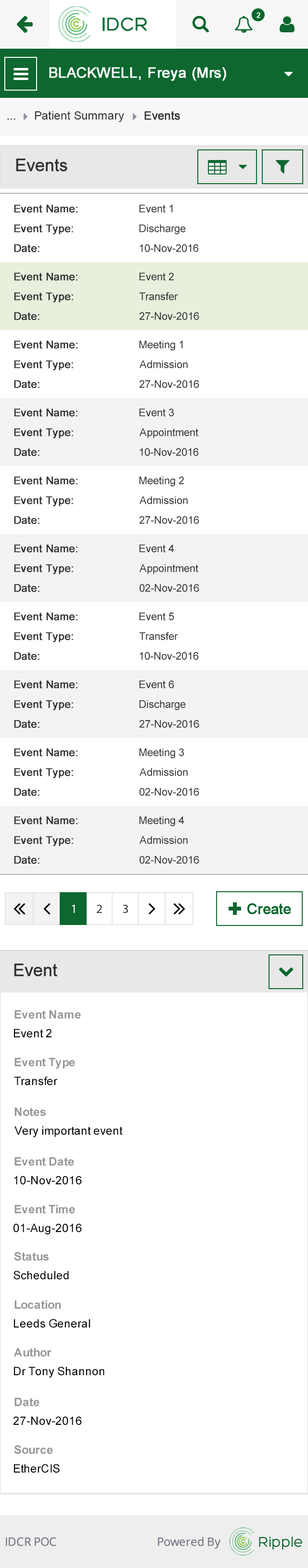
<style>
.page{position:relative;width:308px;height:1568px;background:#ffffff}
.page>*{position:absolute;margin:0}
.t1{font:11.6px "ArialMT";color:#313131}
.t2{font:11.6px "ArialMT";color:#313131;font-weight:bold}
.t3{font:17.4px "ArialMT";color:#303030;font-weight:bold}
.t4{font:10.6px "ArialMT";color:#303030;font-weight:bold}
.t5{font:10.6px "ArialMT";color:#303030}
.t6{font:11.6px "Arial-BoldMT";color:#959595}
.t7{font:11.6px "ArialMT";color:#000000}
</style>
<div class="page">
<p class="t1" style="left:35px;top:111px;width:89px;height:11px">Patient Summary</p>
<p class="t2" style="left:145px;top:111px;width:35px;height:9px">Events</p>
<p class="t1" style="left:7px;top:119px;width:8px;height:1px">...</p>
<p class="t3" style="left:16px;top:159px;width:51px;height:13px">Events</p>
<p class="t4" style="left:14px;top:204px;width:64px;height:9px">Event Name:</p>
<p class="t5" style="left:139px;top:204px;width:34px;height:9px">Event 1</p>
<p class="t4" style="left:14px;top:224px;width:59px;height:11px">Event Type:</p>
<p class="t5" style="left:139px;top:224px;width:47px;height:10px">Discharge</p>
<p class="t4" style="left:14px;top:244px;width:26px;height:8px">Date:</p>
<p class="t5" style="left:140px;top:244px;width:59px;height:8px">10-Nov-2016</p>
<p class="t4" style="left:14px;top:272px;width:64px;height:9px">Event Name:</p>
<p class="t5" style="left:139px;top:272px;width:35px;height:9px">Event 2</p>
<p class="t4" style="left:14px;top:292px;width:59px;height:11px">Event Type:</p>
<p class="t5" style="left:139px;top:292px;width:39px;height:8px">Transfer</p>
<p class="t4" style="left:14px;top:312px;width:26px;height:8px">Date:</p>
<p class="t5" style="left:139px;top:312px;width:61px;height:8px">27-Nov-2016</p>
<p class="t4" style="left:14px;top:340px;width:64px;height:8px">Event Name:</p>
<p class="t5" style="left:139px;top:340px;width:44px;height:10px">Meeting 1</p>
<p class="t4" style="left:14px;top:360px;width:59px;height:11px">Event Type:</p>
<p class="t5" style="left:140px;top:360px;width:48px;height:8px">Admission</p>
<p class="t4" style="left:14px;top:380px;width:26px;height:8px">Date:</p>
<p class="t5" style="left:139px;top:380px;width:61px;height:8px">27-Nov-2016</p>
<p class="t4" style="left:14px;top:408px;width:64px;height:8px">Event Name:</p>
<p class="t5" style="left:139px;top:408px;width:35px;height:8px">Event 3</p>
<p class="t4" style="left:14px;top:428px;width:59px;height:11px">Event Type:</p>
<p class="t5" style="left:140px;top:428px;width:59px;height:10px">Appointment</p>
<p class="t4" style="left:14px;top:448px;width:26px;height:8px">Date:</p>
<p class="t5" style="left:140px;top:448px;width:59px;height:8px">10-Nov-2016</p>
<p class="t4" style="left:14px;top:476px;width:64px;height:8px">Event Name:</p>
<p class="t5" style="left:139px;top:476px;width:45px;height:10px">Meeting 2</p>
<p class="t4" style="left:14px;top:496px;width:59px;height:11px">Event Type:</p>
<p class="t5" style="left:140px;top:496px;width:48px;height:8px">Admission</p>
<p class="t4" style="left:14px;top:516px;width:26px;height:8px">Date:</p>
<p class="t5" style="left:139px;top:516px;width:61px;height:8px">27-Nov-2016</p>
<p class="t4" style="left:14px;top:544px;width:64px;height:8px">Event Name:</p>
<p class="t5" style="left:139px;top:544px;width:35px;height:8px">Event 4</p>
<p class="t4" style="left:14px;top:564px;width:59px;height:11px">Event Type:</p>
<p class="t5" style="left:140px;top:564px;width:59px;height:10px">Appointment</p>
<p class="t4" style="left:14px;top:584px;width:26px;height:8px">Date:</p>
<p class="t5" style="left:140px;top:584px;width:60px;height:8px">02-Nov-2016</p>
<p class="t4" style="left:14px;top:612px;width:64px;height:8px">Event Name:</p>
<p class="t5" style="left:139px;top:612px;width:35px;height:8px">Event 5</p>
<p class="t4" style="left:14px;top:632px;width:59px;height:11px">Event Type:</p>
<p class="t5" style="left:139px;top:632px;width:39px;height:8px">Transfer</p>
<p class="t4" style="left:14px;top:652px;width:26px;height:8px">Date:</p>
<p class="t5" style="left:140px;top:652px;width:59px;height:8px">10-Nov-2016</p>
<p class="t4" style="left:14px;top:680px;width:64px;height:8px">Event Name:</p>
<p class="t5" style="left:139px;top:680px;width:35px;height:8px">Event 6</p>
<p class="t4" style="left:14px;top:700px;width:59px;height:10px">Event Type:</p>
<p class="t5" style="left:139px;top:700px;width:47px;height:10px">Discharge</p>
<p class="t4" style="left:14px;top:720px;width:26px;height:8px">Date:</p>
<p class="t5" style="left:139px;top:720px;width:61px;height:8px">27-Nov-2016</p>
<p class="t4" style="left:14px;top:748px;width:64px;height:8px">Event Name:</p>
<p class="t5" style="left:139px;top:748px;width:46px;height:10px">Meeting 3</p>
<p class="t4" style="left:14px;top:768px;width:59px;height:10px">Event Type:</p>
<p class="t5" style="left:140px;top:768px;width:48px;height:8px">Admission</p>
<p class="t4" style="left:14px;top:788px;width:26px;height:8px">Date:</p>
<p class="t5" style="left:140px;top:788px;width:60px;height:8px">02-Nov-2016</p>
<p class="t4" style="left:14px;top:816px;width:64px;height:8px">Event Name:</p>
<p class="t5" style="left:139px;top:816px;width:46px;height:10px">Meeting 4</p>
<p class="t4" style="left:14px;top:836px;width:59px;height:10px">Event Type:</p>
<p class="t5" style="left:140px;top:836px;width:48px;height:8px">Admission</p>
<p class="t4" style="left:14px;top:856px;width:26px;height:8px">Date:</p>
<p class="t5" style="left:140px;top:856px;width:60px;height:8px">02-Nov-2016</p>
<p class="t3" style="left:14px;top:964px;width:43px;height:13px">Event</p>
<p class="t6" style="left:14px;top:1010px;width:67px;height:9px">Event Name</p>
<p class="t7" style="left:14px;top:1029px;width:38px;height:9px">Event 2</p>
<p class="t6" style="left:14px;top:1058px;width:61px;height:11px">Event Type</p>
<p class="t7" style="left:14px;top:1076px;width:44px;height:10px">Transfer</p>
<p class="t6" style="left:14px;top:1107px;width:32px;height:9px">Notes</p>
<p class="t7" style="left:14px;top:1126px;width:109px;height:11px">Very important event</p>
<p class="t6" style="left:14px;top:1157px;width:60px;height:9px">Event Date</p>
<p class="t7" style="left:14px;top:1176px;width:68px;height:9px">10-Nov-2016</p>
<p class="t6" style="left:14px;top:1205px;width:61px;height:9px">Event Time</p>
<p class="t7" style="left:13px;top:1223px;width:69px;height:11px">01-Aug-2016</p>
<p class="t6" style="left:14px;top:1252px;width:35px;height:9px">Status</p>
<p class="t7" style="left:13px;top:1271px;width:56px;height:9px">Scheduled</p>
<p class="t6" style="left:14px;top:1300px;width:47px;height:9px">Location</p>
<p class="t7" style="left:14px;top:1319px;width:76px;height:9px">Leeds General</p>
<p class="t6" style="left:14px;top:1348px;width:38px;height:9px">Author</p>
<p class="t7" style="left:14px;top:1367px;width:91px;height:11px">Dr Tony Shannon</p>
<p class="t6" style="left:14px;top:1397px;width:26px;height:10px">Date</p>
<p class="t7" style="left:13px;top:1416px;width:69px;height:9px">27-Nov-2016</p>
<p class="t6" style="left:14px;top:1445px;width:39px;height:9px">Source</p>
<p class="t7" style="left:14px;top:1464px;width:46px;height:9px">EtherCIS</p>
</div>
